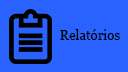
<style>
.page{position:relative;width:128px;height:72px;background:#2962ff}
.page>*{position:absolute;margin:0}
.t1{font:13.3px "Georgia";color:#000000}
</style>
<div class="page">
<p class="t1" style="left:60px;top:29px;width:60px;height:11px">Relatórios</p>
</div>
